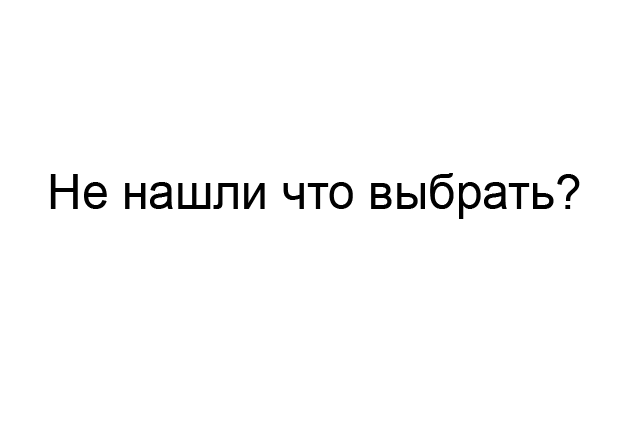
<style>
.page{position:relative;width:620px;height:435px;background:#ffffff}
.page>*{position:absolute;margin:0}
.t1{font:48px "ArialMT";color:#000000}
</style>
<div class="page">
<p class="t1" style="left:50px;top:173px;width:530px;height:46px">Не нашли что выбрать?</p>
</div>
